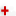
<style>
.page{position:relative;width:16px;height:16px;background:#ffffff}
.page>*{position:absolute;margin:0}
.t1{font:16px "StencilStd";letter-spacing:0.05em;color:#ce0000;scale:0.9 1}
</style>
<div class="page">
<p class="t1" style="left:1px;top:6px;width:8px;height:10px">+</p>
</div>
